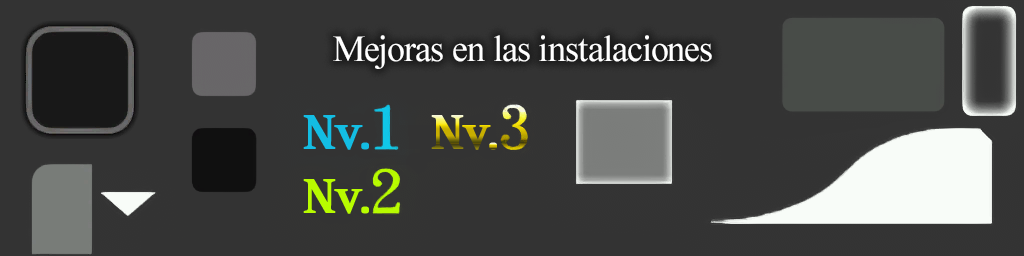
<style>
.page{position:relative;width:1024px;height:256px;background:#333333}
.page>*{position:absolute;margin:0}
.t1{font:37px "TimesNewRomanPSMT";letter-spacing:-0.02em;color:#ffffff}
.t2{font:65.9px "AntichaAtelierSerif";color:#13bde3;font-weight:bold}
.t3{font:65.9px "AntichaAtelierSerif";font-weight:bold}
.t4{font:65.9px "AntichaAtelierSerif";color:#b8fc00;font-weight:bold}
</style>
<div class="page">
<p class="t1" style="left:333px;top:35px;width:379px;height:34px">Mejoras en las instalaciones</p>
<p class="t2" style="left:303px;top:115px;width:60px;height:35px">Nv</p>
<p class="t3" style="left:431px;top:115px;width:60px;height:35px">Nv</p>
<p class="t2" style="left:361px;top:142px;width:8px;height:8px">.</p>
<p class="t3" style="left:489px;top:142px;width:8px;height:8px">.</p>
<p class="t4" style="left:303px;top:179px;width:60px;height:35px">Nv</p>
<p class="t4" style="left:361px;top:206px;width:8px;height:8px">.</p>
</div>
